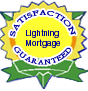
<style>
.page{position:relative;width:88px;height:91px;background:#ffffff}
.page>*{position:absolute;margin:0}
.t1{font:7.1px "CalifornianFB-Reg";color:#000099;scale:1.04 1}
.t2{font:8px "Helvetica";color:#000099;scale:1.04 1}
</style>
<div class="page">
<p class="t1" style="left:10px;top:10px;width:66px;height:27px">SATISFACTION</p>
<p class="t2" style="left:26px;top:29px;width:34px;height:19px">Lightning <br>Mortgage</p>
<p class="t1" style="left:14px;top:47px;width:57px;height:18px">GUARANTEED</p>
</div>
